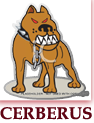
<style>
.page{position:relative;width:94px;height:123px;background:#ffffff}
.page>*{position:absolute;margin:0}
.t1{font:17px "BookAntiqua-Bold";color:#5f0413}
</style>
<div class="page">
<p class="t1" style="left:0px;top:107px;width:92px;height:13px">CERBERUS</p>
</div>
